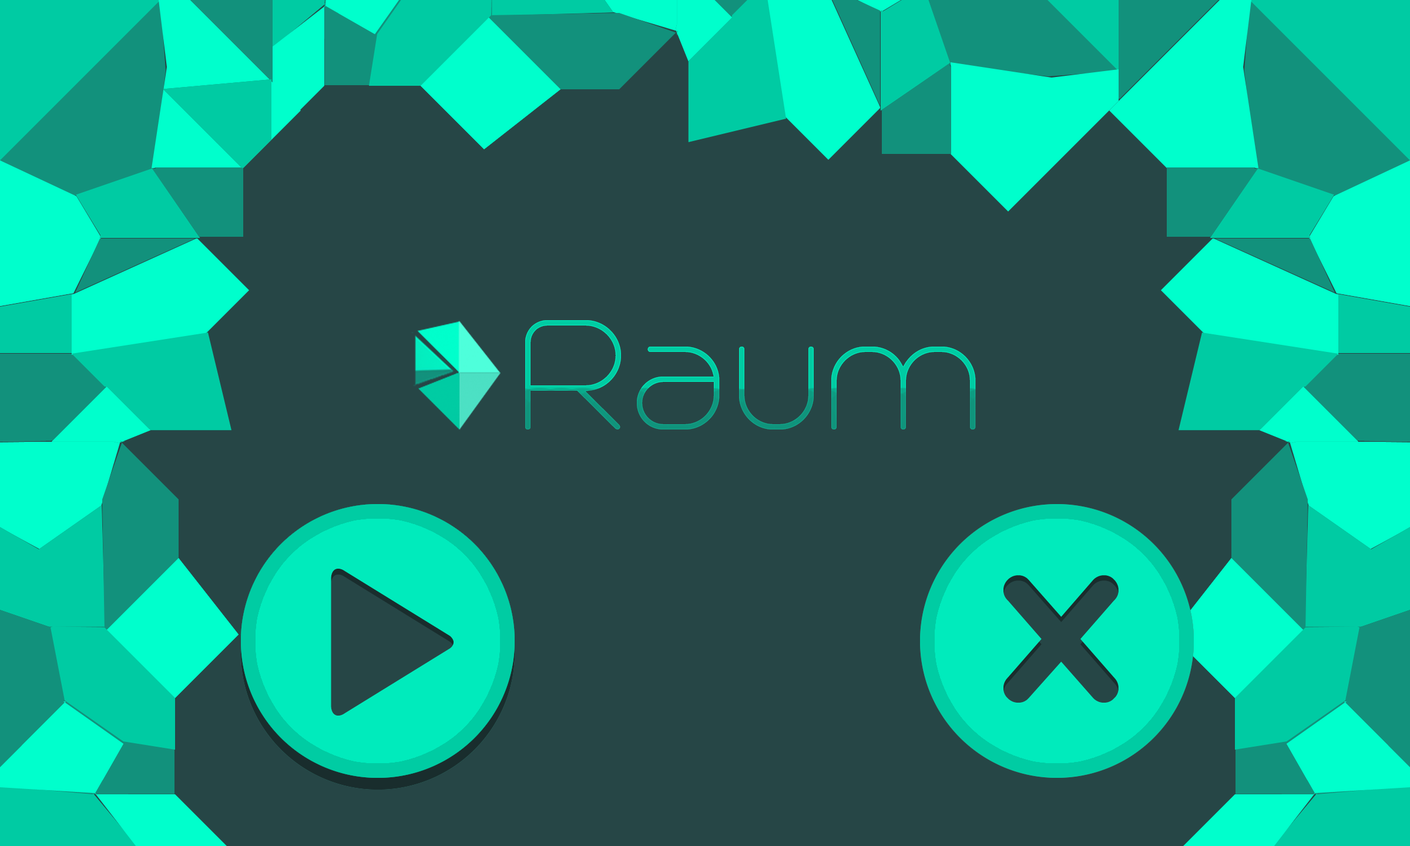
<style>
.page{position:relative;width:1410px;height:846px;background:#264646}
.page>*{position:absolute;margin:0}
.t1{font:195.8px "Trench-Thin"}
</style>
<div class="page">
<p class="t1" style="left:525px;top:320px;width:451px;height:109px">Raum</p>
</div>
